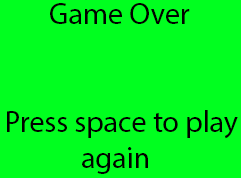
<style>
.page{position:relative;width:241px;height:178px;background:#00ff1f}
.page>*{position:absolute;margin:0}
.t1{font:30px "MyriadPro-Regular";color:#000000}
</style>
<div class="page">
<p class="t1" style="left:7px;top:3px;width:231px;height:171px">Game Over<br><br><br>Press space to play<br>            again</p>
</div>
